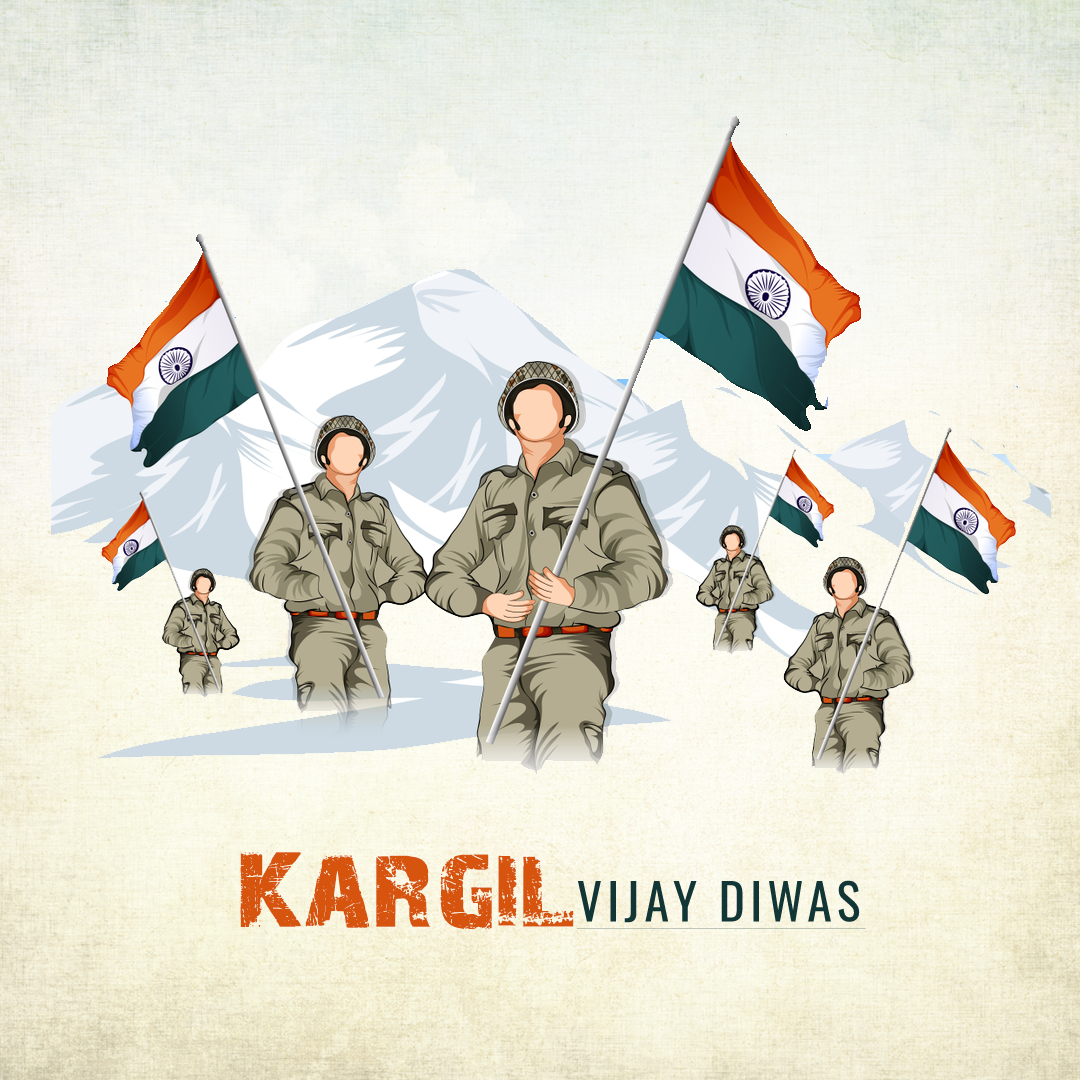
<style>
.page{position:relative;width:1080px;height:1080px}
.page>*{position:absolute;margin:0}
.t1{font:106.2px "28-Days-Later-Regular";color:#d7540e;scale:1.18 1}
.t2{font:50px "Oswald-Regular";letter-spacing:0.1em;color:#123536;text-transform:uppercase;text-decoration:underline}
</style>
<div class="page">
<p class="t1" style="left:240px;top:852px;width:334px;height:78px">Kargil</p>
<p class="t2" style="left:576px;top:880px;width:290px;height:49px">Vijay Diwas</p>
</div>
